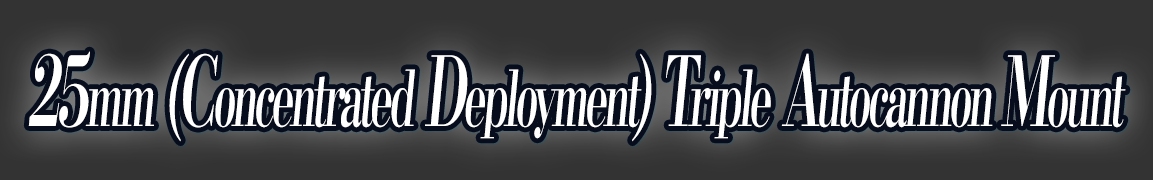
<style>
.page{position:relative;width:1153px;height:180px;background:#333333}
.page>*{position:absolute;margin:0}
.t1{font:76.8px "KochoStd-Heavy";letter-spacing:-0.08em;color:#ffffff;font-style:italic;scale:0.54 1}
.t2{font:96px "KochoStd-Heavy";letter-spacing:-0.08em;color:#ffffff;font-style:italic;scale:0.54 1}
</style>
<div class="page">
<p class="t1" style="left:28px;top:51px;width:1098px;height:91px"><span class="t2">25</span>mm<span class="t2"> (C</span>oncentrated<span class="t2"> D</span>eployment<span class="t2">) T</span>riple<span class="t2"> A</span>utocannon <span class="t2">M</span>ount</p>
</div>
